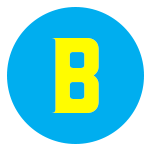
<style>
.page{position:relative;width:150px;height:150px;background:#00aeef}
.page>*{position:absolute;margin:0}
.t1{font:50px "Thailandesa";color:#fffc00}
</style>
<div class="page">
<p class="t1" style="left:51px;top:38px;width:48px;height:75px">B</p>
</div>
